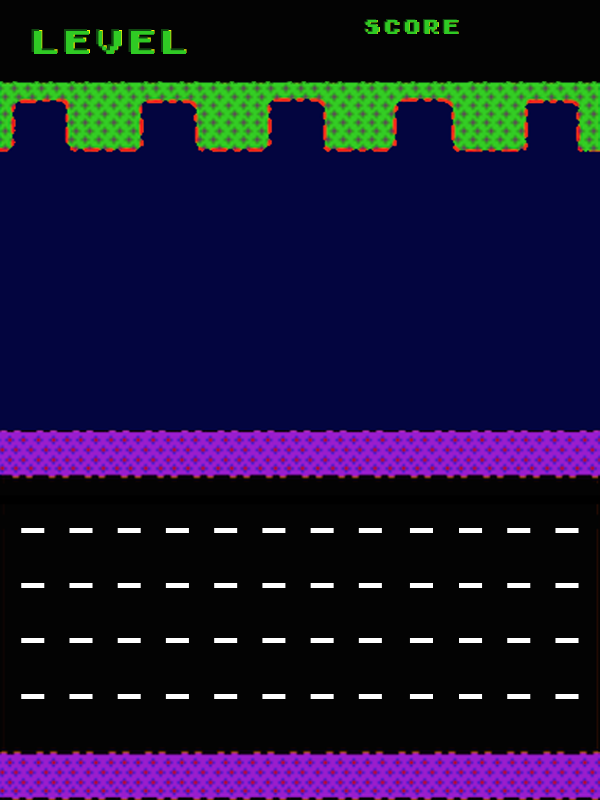
<style>
.page{position:relative;width:600px;height:800px;background:#030303}
.page>*{position:absolute;margin:0}
.t1{font:30.8px "Early-GameBoy";letter-spacing:0.05em}
.t2{font:30.8px "Early-GameBoy";letter-spacing:0.05em;color:#2fca24}
.t3{font:18.7px "Early-GameBoy";letter-spacing:0.05em}
.t4{font:18.7px "Early-GameBoy";letter-spacing:0.05em;color:#2fca24}
</style>
<div class="page">
<p class="t1" style="left:31px;top:29px;width:153px;height:23px">LEVEL</p>
<p class="t2" style="left:34px;top:30px;width:153px;height:23px">LEVEL</p>
<p class="t3" style="left:364px;top:19px;width:93px;height:14px">SCORE</p>
<p class="t4" style="left:365px;top:20px;width:94px;height:14px">SCORE</p>
<p class="t4" style="left:366px;top:20px;width:93px;height:14px">SCORE</p>
<p class="t2" style="left:34px;top:31px;width:152px;height:23px">LEVEL</p>
</div>
